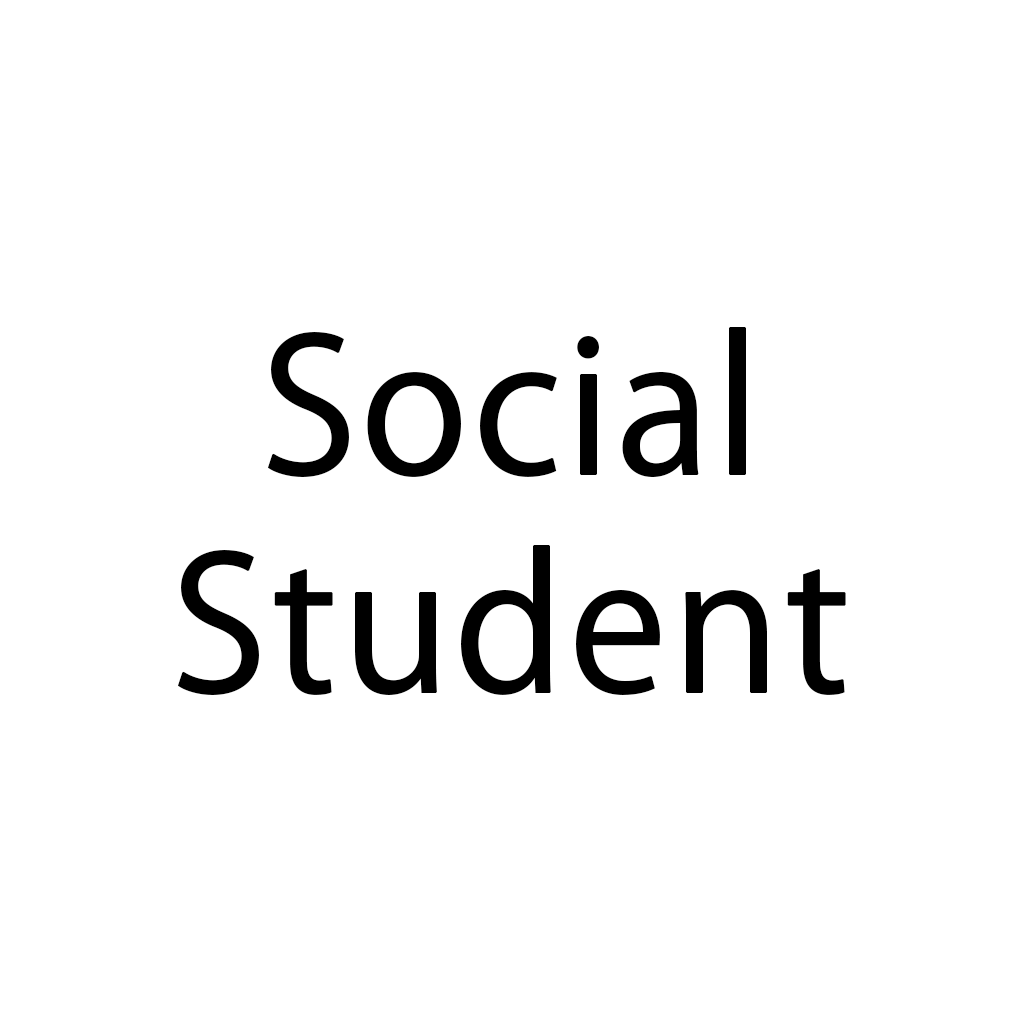
<style>
.page{position:relative;width:1024px;height:1024px;background:#ffffff}
.page>*{position:absolute;margin:0}
.t1{font:181.9px "KozGoPr6N-Regular";color:#000000;font-weight:bold}
</style>
<div class="page">
<p class="t1" style="left:177px;top:327px;width:669px;height:368px;text-align:center">Social<br>Student</p>
</div>
